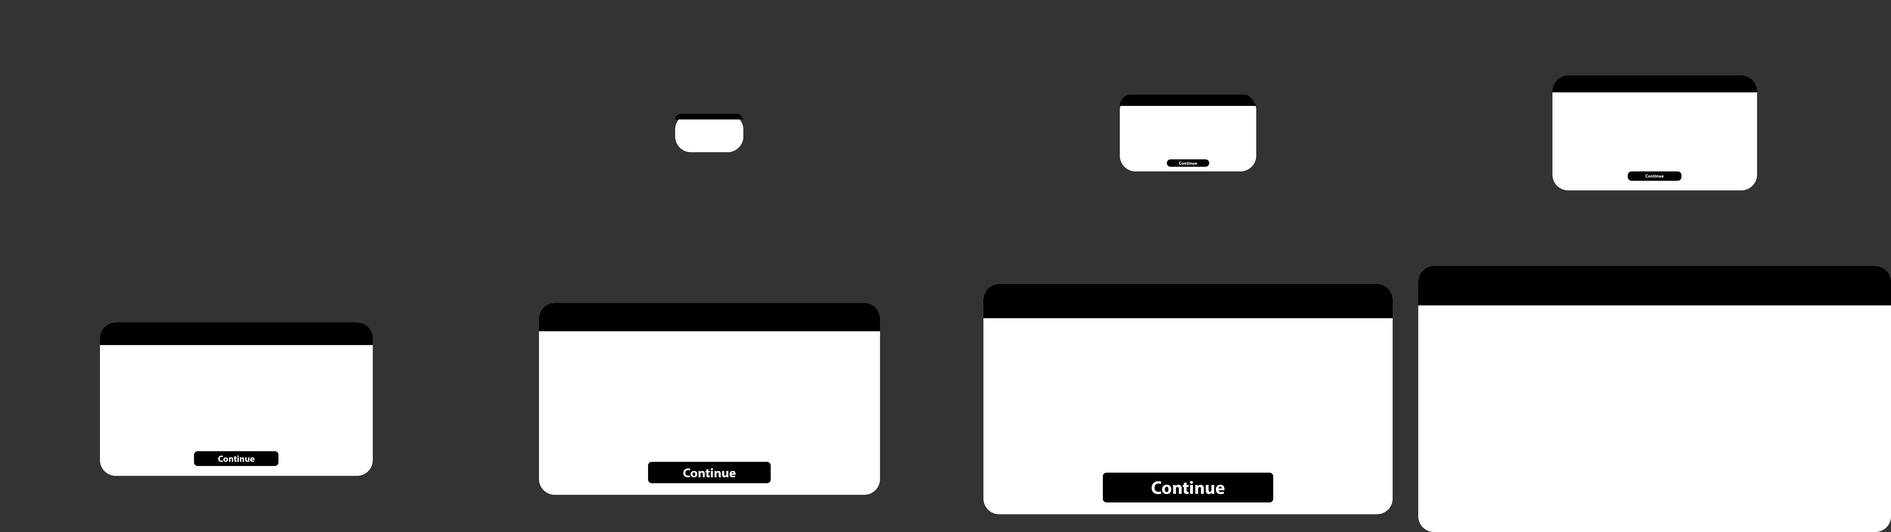
<style>
.page{position:relative;width:1891px;height:532px;background:#333333}
.page>*{position:absolute;margin:0}
.t1{font:4.5px "MyriadPro-Bold";color:#ffffff}
.t2{font:9px "MyriadPro-Bold";color:#ffffff}
.t3{font:13.1px "MyriadPro-Bold";color:#ffffff}
.t4{font:18.1px "MyriadPro-Bold";color:#ffffff}
</style>
<div class="page">
<p class="t1" style="left:1179px;top:161px;width:18px;height:4px">Continue</p>
<p class="t1" style="left:1645px;top:174px;width:18px;height:3px">Continue</p>
<p class="t2" style="left:218px;top:455px;width:37px;height:7px">Continue</p>
<p class="t3" style="left:683px;top:468px;width:53px;height:9px">Continue</p>
<p class="t4" style="left:1151px;top:481px;width:73px;height:13px">Continue</p>
</div>
